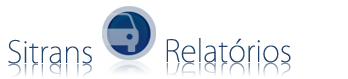
<style>
.page{position:relative;width:348px;height:79px;background:#ffffff}
.page>*{position:absolute;margin:0}
.t1{font:30px "KozGoPro-ExtraLight";color:#22436a}
.t2{font:30px "KozGoPro-ExtraLight"}
</style>
<div class="page">
<p class="t1" style="left:8px;top:39px;width:84px;height:25px">Sitrans</p>
<p class="t1" style="left:166px;top:38px;width:125px;height:25px">Relatórios</p>
<p class="t2" style="left:8px;top:63px;width:84px;height:16px">Sitrans</p>
</div>
